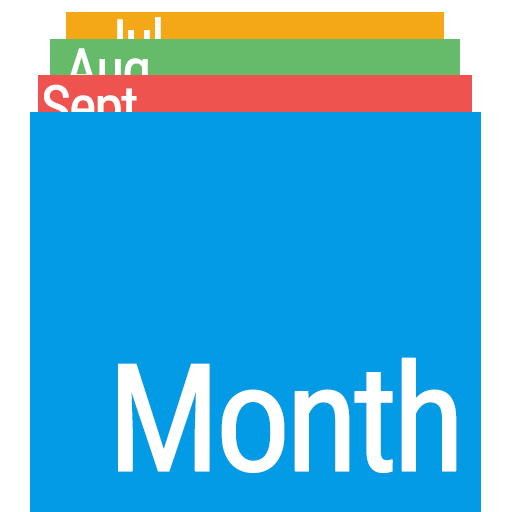
<style>
.page{position:relative;width:512px;height:512px;background:#039be5}
.page>*{position:absolute;margin:0}
.t1{font:58.3px "RobotoCondensed-Regular";letter-spacing:-0.06em;font-weight:bold}
.t2{font:150px "RobotoCondensed-Regular";letter-spacing:-0.06em;color:#ffffff;font-weight:bold}
</style>
<div class="page">
<p class="t1" style="left:100px;top:17px;width:61px;height:45px">Jul</p>
<p class="t1" style="left:65px;top:48px;width:83px;height:55px">Aug</p>
<p class="t1" style="left:42px;top:84px;width:95px;height:56px">Sept</p>
<p class="t2" style="left:118px;top:357px;width:339px;height:116px">Month</p>
</div>
